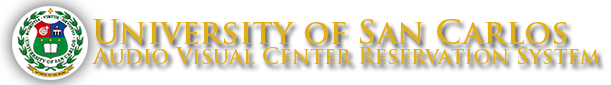
<style>
.page{position:relative;width:611px;height:85px;background:#ffffff}
.page>*{position:absolute;margin:0}
.t1{font:33px "TrajanPro-Bold";color:#e2af18}
.t2{font:22px "TrajanPro-Bold";color:#e2af18}
</style>
<div class="page">
<p class="t1" style="left:92px;top:19px;width:475px;height:25px">University of San Carlos</p>
<p class="t2" style="left:92px;top:47px;width:508px;height:17px">Audio Visual Center Reservation System</p>
</div>
